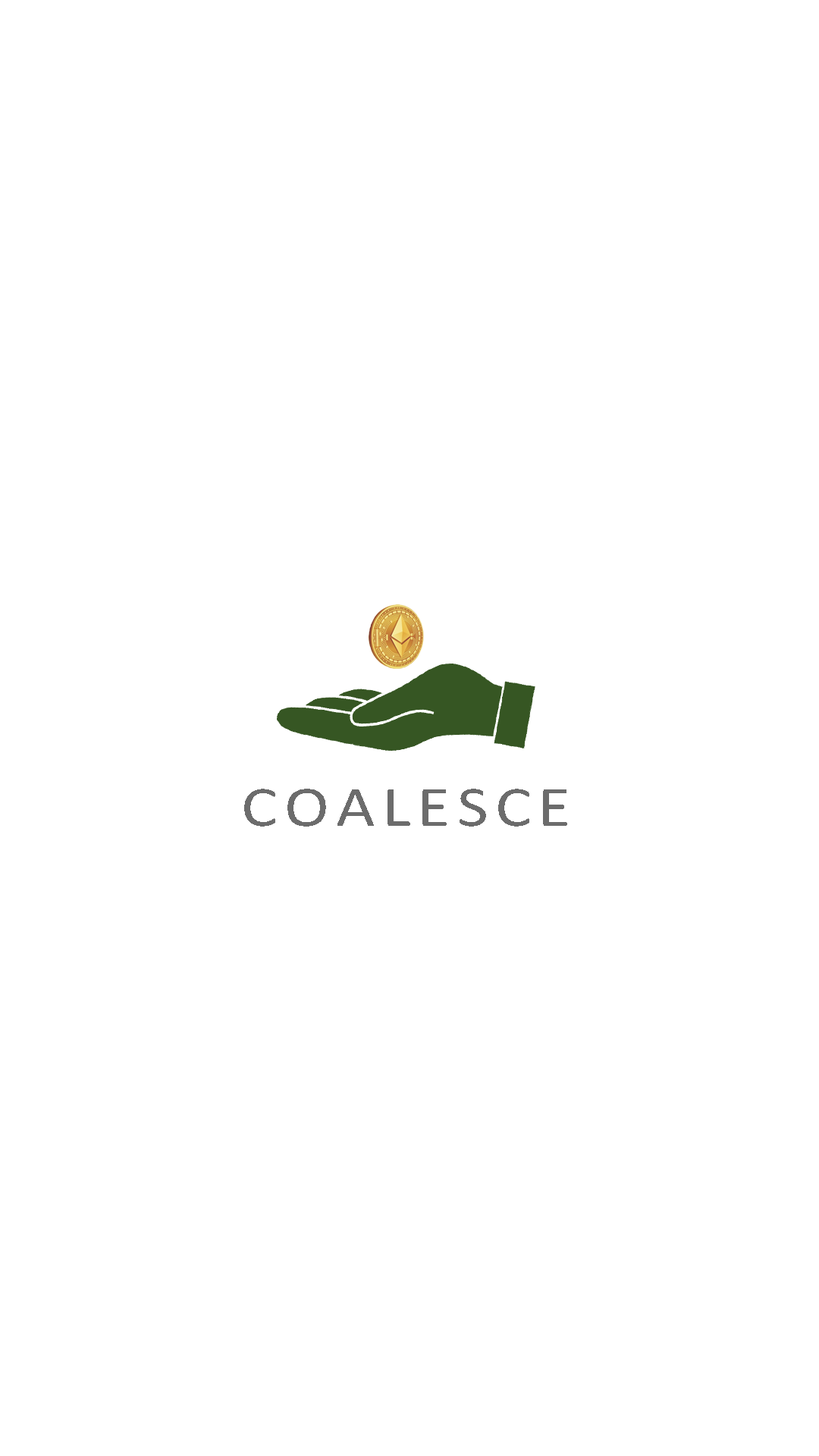
<style>
.page{position:relative;width:819px;height:1456px;background:#ffffff}
.page>*{position:absolute;margin:0}
.t1{font:57.9px "Calibri";letter-spacing:0.1em;color:#6c6c6c;scale:1.17 1}
</style>
<div class="page">
<p class="t1" style="left:244px;top:789px;width:323px;height:38px">COALESCE</p>
</div>
